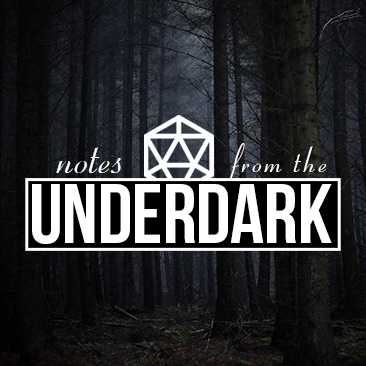
<style>
.page{position:relative;width:366px;height:366px}
.page>*{position:absolute;margin:0}
.t1{font:60.6px "OhioScript";color:#ffffff}
.t2{font:41.8px "OhioScript";letter-spacing:0.06em;color:#ffffff}
.t3{font:83.6px "BebasNeue";color:#ffffff}
</style>
<div class="page">
<p class="t1" style="left:56px;top:147px;width:65px;height:26px">notes</p>
<p class="t2" style="left:228px;top:143px;width:99px;height:38px">from the</p>
<p class="t3" style="left:32px;top:184px;width:300px;height:60px">Underdark</p>
</div>
